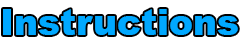
<style>
.page{position:relative;width:240px;height:50px;background:#ffffff}
.page>*{position:absolute;margin:0}
.t1{font:36px "Arial-Black";color:#00a8ff}
</style>
<div class="page">
<p class="t1" style="left:3px;top:9px;width:235px;height:26px">Instructions</p>
</div>
